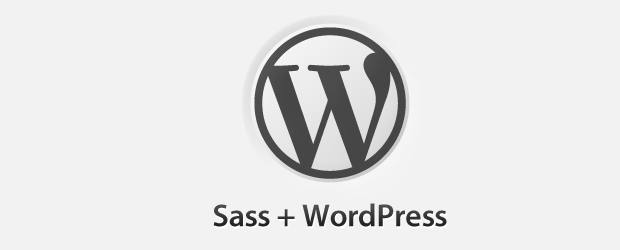
<style>
.page{position:relative;width:620px;height:250px;background:#f2f2f2}
.page>*{position:absolute;margin:0}
.t1{font:32px "MyriadPro-Semibold";letter-spacing:-0.01em;color:#474747}
</style>
<div class="page">
<p class="t1" style="left:213px;top:203px;width:234px;height:24px">Sass + WordPress</p>
</div>
